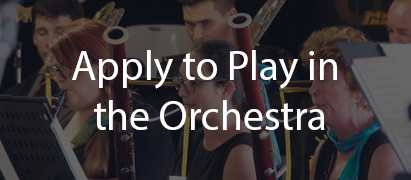
<style>
.page{position:relative;width:411px;height:180px}
.page>*{position:absolute;margin:0}
.t1{font:41.7px "MyriadPro-Regular";color:#ffffff}
</style>
<div class="page">
<p class="t1" style="left:72px;top:50px;width:265px;height:80px;text-align:center">Apply to Play in <br>the Orchestra</p>
</div>
